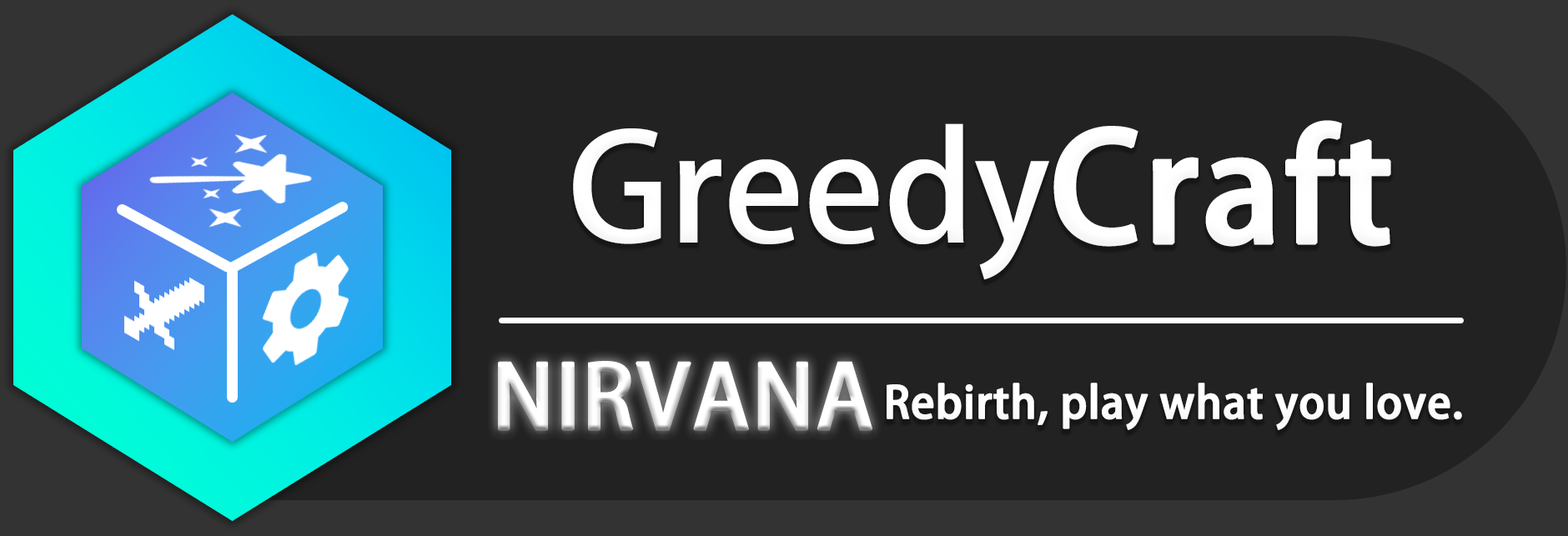
<style>
.page{position:relative;width:1568px;height:536px;background:#222222}
.page>*{position:absolute;margin:0}
.t1{font:147.7px "AdobeHeitiStd-Regular";color:#ffffff}
.t2{font:147.7px "AdobeHeitiStd-Regular";color:#ffffff;font-weight:bold}
.t3{font:86.9px "AdobeHeitiStd-Regular";color:#ffffff;text-transform:uppercase;font-weight:bold}
.t4{font:43.4px "AdobeHeitiStd-Regular";color:#ffffff;font-weight:bold}
</style>
<div class="page">
<p class="t1" style="left:573px;top:120px;width:818px;height:160px">Greedy<span class="t2">Craft</span></p>
<p class="t3" style="left:498px;top:361px;width:374px;height:70px">Nirvana</p>
<p class="t4" style="left:887px;top:383px;width:575px;height:47px">Rebirth, play what you love.</p>
</div>
